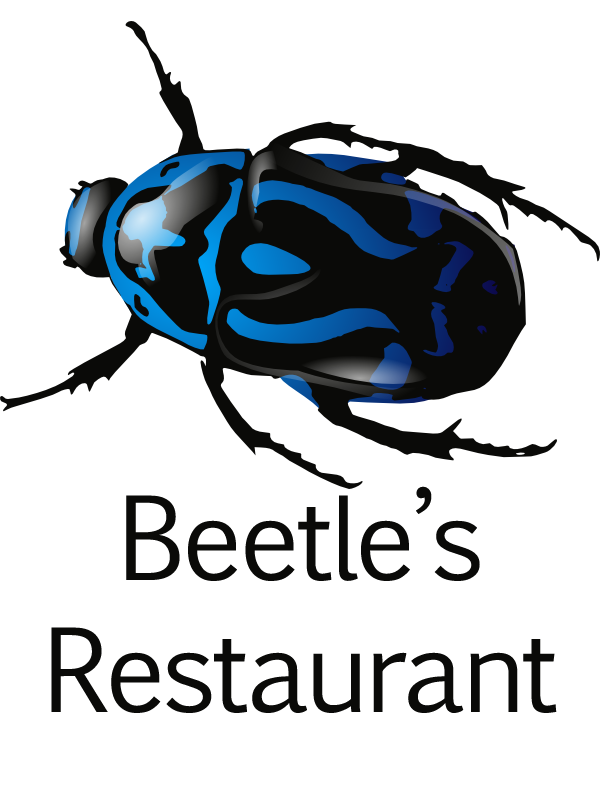
<style>
.page{position:relative;width:600px;height:800px;background:#ffffff}
.page>*{position:absolute;margin:0}
.t1{font:110px "EuphemiaCAS";letter-spacing:-0.03em;color:#0a0a08}
</style>
<div class="page">
<p class="t1" style="left:51px;top:486px;width:506px;height:227px;text-align:center">Beetle’s<br>Restaurant</p>
</div>
